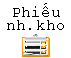
<style>
.page{position:relative;width:71px;height:58px;background:#ffffff}
.page>*{position:absolute;margin:0}
.t1{font:12px/13.3px "CourierNewPSMT";color:#000000}
</style>
<div class="page">
<p class="t1" style="left:7px;top:3px;width:57px;height:27px;text-align:center">Phiếu<br>nh.kho</p>
</div>
